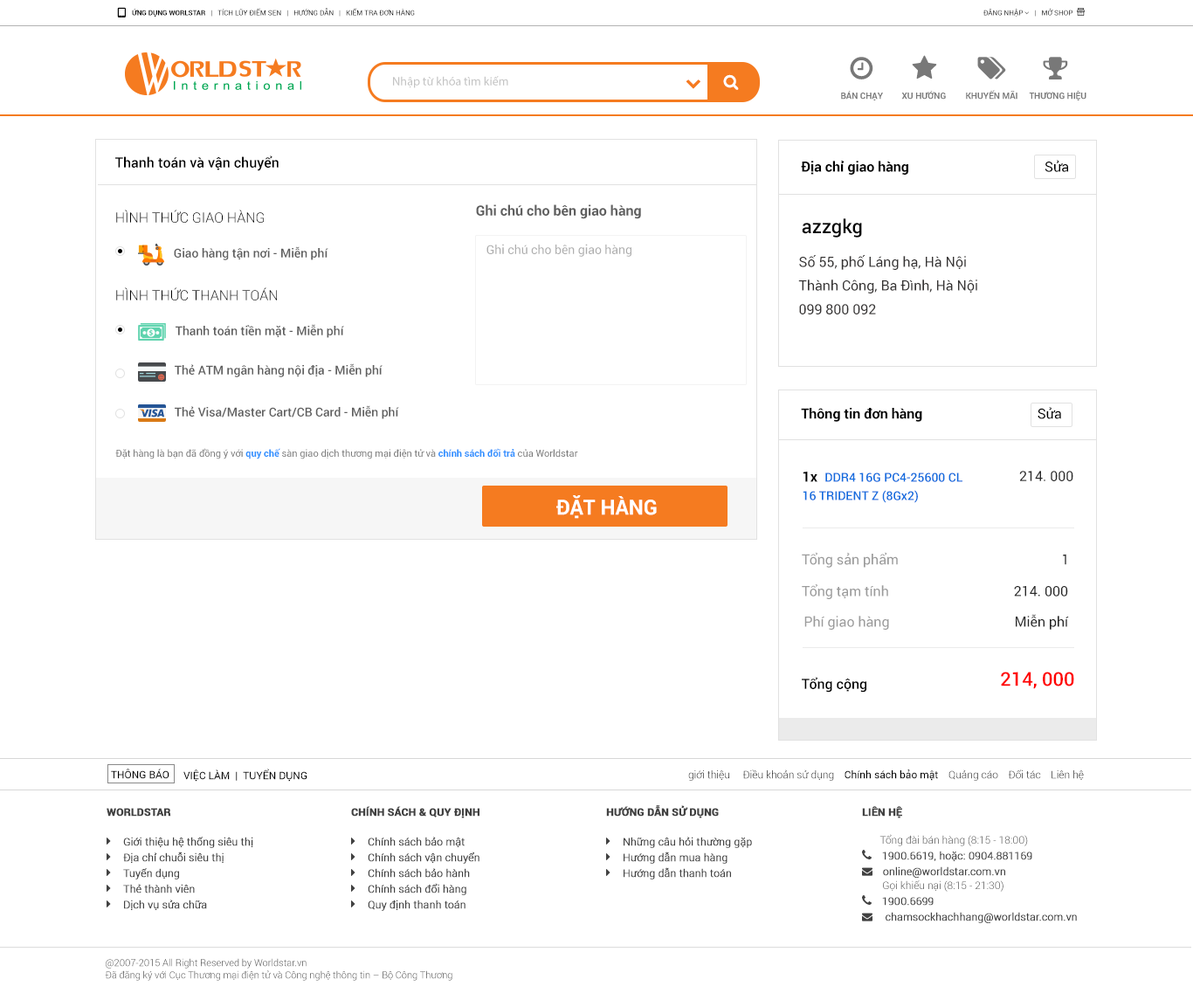
<style>
.page{position:relative;width:1193px;height:1000px;background:#ffffff}
.page>*{position:absolute;margin:0}
.t1{font:7px "Roboto-Bold";color:#000000;text-transform:uppercase}
.t2{font:7px "Roboto-Regular";color:#000000;text-transform:uppercase}
.t3{font:12.2px "MyriadPro-Regular";color:#c3c3c3}
.t4{font:8.7px "Roboto-Bold";color:#787878;text-transform:uppercase}
.t5{font:14px "Roboto-Medium";color:#000000}
.t6{font:14px "Roboto-Bold";color:#000000}
.t7{font:14px "Roboto-Regular";color:#000000}
.t8{font:14px "Roboto-Light";color:#000000;text-transform:uppercase}
.t9{font:14px "Roboto-Bold";color:#5f5f5f}
.t10{font:19.2px "Roboto-Medium";color:#000000}
.t11{font:12.2px "Roboto-Regular";color:#aeaeae}
.t12{font:12.2px "Roboto-Medium";color:#5f5f5f}
.t13{font:14px "Roboto-Regular";color:#353333}
.t14{font:9.6px "Roboto-Regular";color:#777777}
.t15{font:9.6px "Roboto-Bold";color:#2f91ff}
.t16{font:12.2px/18.4px "Roboto-Medium";color:#106cde}
.t17{font:14.3px/18.4px "Roboto-Bold";color:#000000}
.t18{font:14px "Roboto-Regular";color:#282828}
.t19{font:21px "Roboto-Bold";color:#ffffff}
.t20{font:14px "Roboto-Regular";color:#9b9b9b}
.t21{font:19.2px "Roboto-Medium";color:#ff0000}
.t22{font:10.5px "Roboto-Regular";color:#000000}
.t23{font:10.5px "Roboto-Light";color:#000000}
.t24{font:9.6px/12.2px "Roboto-Light";color:#414141}
</style>
<div class="page">
<p class="t1" style="left:132px;top:8px;width:283px;height:9px">ứng dụng Worlstar   |   <span class="t2">Tích lũy điểm sen</span>   |   <span class="t2">hướng dẫn</span>   |   <span class="t2">kiểm tra đơn hàng</span></p>
<p class="t3" style="left:393px;top:76px;width:115px;height:12px">Nhập từ khóa tìm kiếm</p>
<p class="t4" style="left:966px;top:90px;width:51px;height:10px">khuyến mãi</p>
<p class="t4" style="left:841px;top:91px;width:42px;height:9px">Bán chạy</p>
<p class="t4" style="left:901px;top:91px;width:45px;height:9px">xu hướng</p>
<p class="t4" style="left:1029px;top:91px;width:57px;height:9px">thương hiệu</p>
<p class="t5" style="left:115px;top:155px;width:164px;height:16px">Thanh toán và vận chuyển</p>
<p class="t6" style="left:801px;top:160px;width:268px;height:15px">Địa chỉ giao hàng                                       <span class="t7">Sửa</span></p>
<p class="t8" style="left:116px;top:210px;width:148px;height:13px">Hình thức giao hàng</p>
<p class="t9" style="left:476px;top:204px;width:165px;height:15px">Ghi chú cho bên giao hàng</p>
<p class="t10" style="left:802px;top:218px;width:60px;height:19px">azzgkg</p>
<p class="t11" style="left:486px;top:244px;width:145px;height:13px">Ghi chú cho bên giao hàng</p>
<p class="t12" style="left:174px;top:246px;width:154px;height:14px">Giao hàng tận nơi - Miễn phí</p>
<p class="t13" style="left:799px;top:255px;width:167px;height:15px">Số 55, phố Láng hạ, Hà Nội</p>
<p class="t13" style="left:798px;top:279px;width:179px;height:14px">Thành Công, Ba Đình, Hà Nội</p>
<p class="t8" style="left:116px;top:287px;width:161px;height:13px">Hình thức thanh toán</p>
<p class="t13" style="left:799px;top:304px;width:77px;height:10px">099 800 092</p>
<p class="t12" style="left:176px;top:324px;width:168px;height:14px">Thanh toán tiền mặt - Miễn phí</p>
<p class="t12" style="left:175px;top:363px;width:207px;height:14px">Thẻ ATM ngân hàng nội địa - Miễn phí</p>
<p class="t12" style="left:175px;top:405px;width:224px;height:14px">Thẻ Visa/Master Cart/CB Card - Miễn phí</p>
<p class="t6" style="left:801px;top:407px;width:260px;height:15px">Thông tin đơn hàng                                 <span class="t7">Sửa</span></p>
<p class="t14" style="left:115px;top:448px;width:463px;height:11px">Đặt hàng là bạn đã đồng ý với <span class="t15">quy chế</span> sàn giao dịch thương mại điện tử và <span class="t15">chính sách đổi trả</span> của Worldstar</p>
<p class="t16" style="left:802px;top:472px;width:160px;height:31px"><span class="t17">1x  </span>DDR4 16G PC4-25600 CL<br>16 TRIDENT Z (8Gx2)</p>
<p class="t18" style="left:1019px;top:471px;width:54px;height:10px">214. 000</p>
<p class="t19" style="left:556px;top:495px;width:101px;height:24px">ĐẶT HÀNG</p>
<p class="t20" style="left:802px;top:552px;width:264px;height:16px">Tổng sản phẩm<span class="t18">                                               1</span></p>
<p class="t20" style="left:802px;top:584px;width:266px;height:15px">Tổng tạm tính<span class="t18">                                    214. 000</span></p>
<p class="t20" style="left:804px;top:614px;width:265px;height:16px">Phí giao hàng<span class="t18">                                    Miễn phí</span></p>
<p class="t5" style="left:802px;top:677px;width:64px;height:15px">Tổng cộng</p>
<p class="t21" style="left:1001px;top:671px;width:73px;height:18px">214, 000</p>
<p class="t22" style="left:111px;top:768px;width:58px;height:11px">THÔNG BÁO</p>
<p class="t22" style="left:183px;top:768px;width:124px;height:13px">VIỆC LÀM  |  TUYỂN DỤNG</p>
<p class="t23" style="left:688px;top:769px;width:396px;height:12px">giới thiệu     Điều khoản sử dụng    <span class="t22">Chính sách bảo mật</span>    Quảng cáo    Đối tác    Liên hệ</p>
<p class="t24" style="left:105px;top:958px;width:347px;height:23px">@2007-2015 All Right Reserved by Worldstar.vn <br>Đã đăng ký với Cục Thương mại điện tử và Công nghệ thông tin – Bộ Công Thương</p>
</div>
